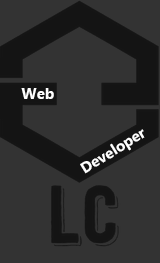
<style>
.page{position:relative;width:160px;height:263px;background:#333333}
.page>*{position:absolute;margin:0}
.t1{font:15.2px "MicrosoftNewTaiLue-Bold";color:#ffffff}
</style>
<div class="page">
<p class="t1" style="left:21px;top:88px;width:33px;height:11px">Web</p>
<p class="t1" style="left:80px;top:129px;width:65px;height:45px;rotate:-32deg">Developer</p>
</div>
